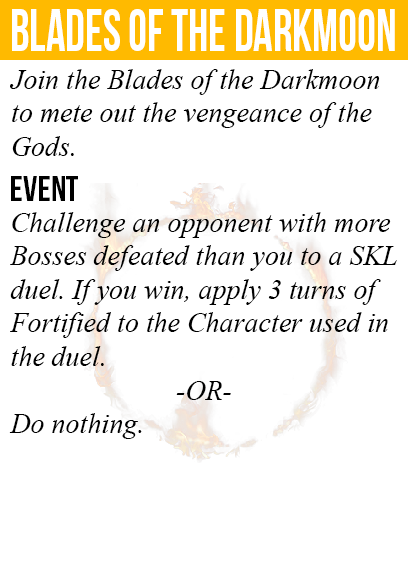
<style>
.page{position:relative;width:408px;height:585px;background:#ffffff}
.page>*{position:absolute;margin:0}
.t1{font:60px "BebasNeue";color:#ffffff;scale:0.8 1}
.t2{font:28px "TimesNewRomanPS-ItalicMT";color:#000000}
.t3{font:36px "BebasNeue";color:#000000}
</style>
<div class="page">
<p class="t1" style="left:12px;top:9px;width:383px;height:42px">blades of the darkmoon</p>
<p class="t2" style="left:10px;top:69px;width:370px;height:87px">Join the Blades of the Darkmoon<br>to mete out the vengeance of the<br>Gods.</p>
<p class="t3" style="left:11px;top:176px;width:67px;height:25px">event</p>
<p class="t2" style="left:9px;top:212px;width:388px;height:227px">Challenge an opponent with more<br>Bosses defeated than you to a SKL<br>duel. If you win, apply 3 turns of<br>Fortified to the Character used in<br>the duel.<br><br>Do nothing.</p>
<p class="t2" style="left:176px;top:381px;width:55px;height:19px">-OR-</p>
</div>
